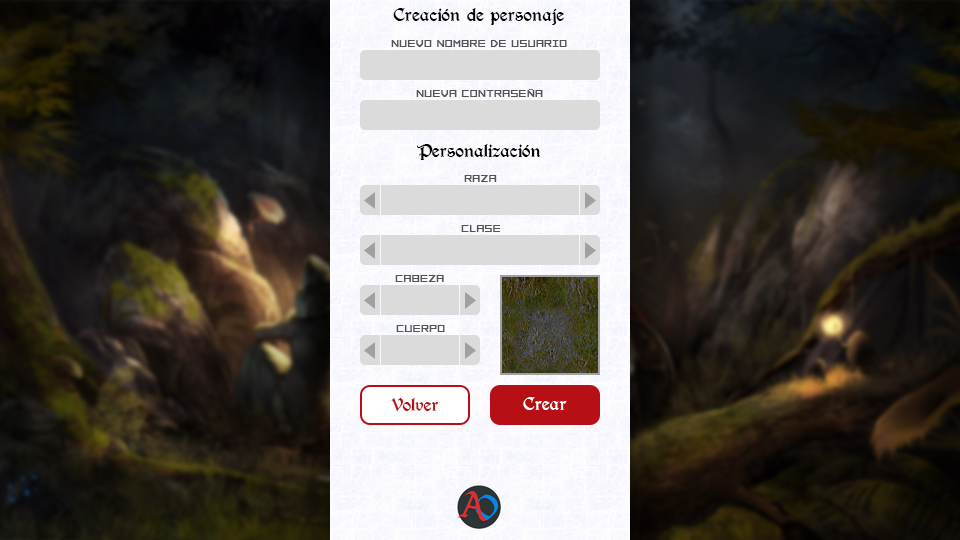
<style>
.page{position:relative;width:960px;height:540px}
.page>*{position:absolute;margin:0}
.t1{font:13px "BerryRotunda-Regular";color:#000000}
.t2{font:13px "FORCED-SQUARE";color:#535353}
</style>
<div class="page">
<p class="t1" style="left:393px;top:8px;width:171px;height:17px">Creación de personaje</p>
<p class="t2" style="left:391px;top:40px;width:176px;height:7px">NUEVO NOMBRE DE USUARIO</p>
<p class="t2" style="left:416px;top:89px;width:127px;height:8px">NUEVA CONTRASEÑA</p>
<p class="t1" style="left:417px;top:144px;width:124px;height:16px">Personalización</p>
<p class="t2" style="left:464px;top:175px;width:33px;height:7px">RAZA</p>
<p class="t2" style="left:461px;top:225px;width:40px;height:7px">CLASE</p>
<p class="t2" style="left:395px;top:275px;width:49px;height:7px">CABEZA</p>
<p class="t2" style="left:396px;top:325px;width:49px;height:7px">CUERPO</p>
</div>
